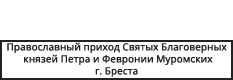
<style>
.page{position:relative;width:233px;height:80px;background:#ffffff}
.page>*{position:absolute;margin:0}
.t1{font:10px "OpenSans-Medium";color:#222222}
</style>
<div class="page">
<p class="t1" style="left:7px;top:42px;width:220px;height:35px;text-align:center">Православный приход Святых Благоверных<br> князей Петра и Февронии Муромских<br>г. Бреста</p>
</div>
